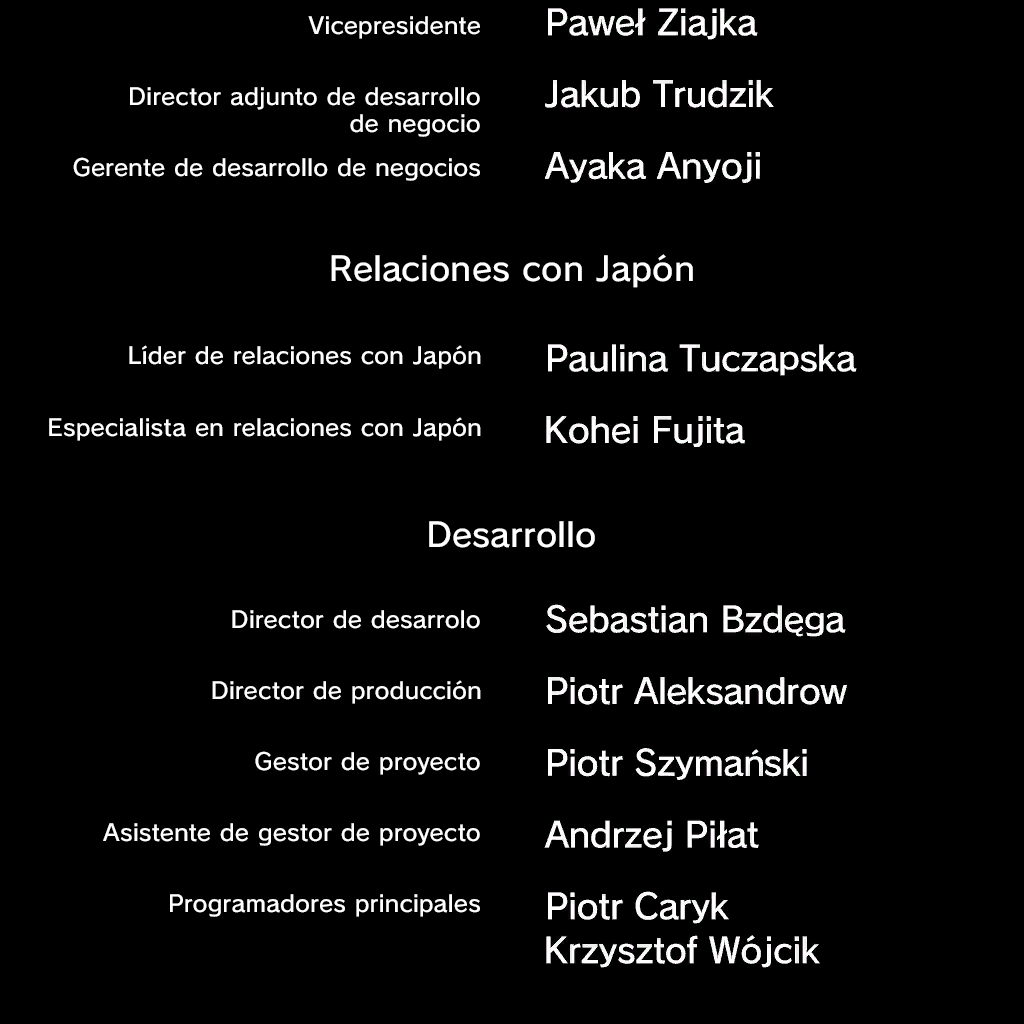
<style>
.page{position:relative;width:1024px;height:1024px;background:#000000}
.page>*{position:absolute;margin:0}
.t1{font:22.8px "SCEPS3RodinLATIN-Regular";letter-spacing:0.015em;color:#ffffff}
.t2{font:32.9px "SCEPS3RodinLATIN-Regular";letter-spacing:0.015em;color:#ffffff}
</style>
<div class="page">
<p class="t1" style="left:308px;top:16px;width:172px;height:23px">Vicepresidente</p>
<p class="t1" style="left:130px;top:87px;width:350px;height:50px;text-align:right">Director adjunto de desarrollo<br>de negocio</p>
<p class="t1" style="left:73px;top:157px;width:407px;height:24px">Gerente de desarrollo de negocios</p>
<p class="t2" style="left:331px;top:254px;width:362px;height:34px">Relaciones con Japón</p>
<p class="t1" style="left:129px;top:345px;width:352px;height:24px">Líder de relaciones con Japón</p>
<p class="t1" style="left:49px;top:417px;width:432px;height:24px">Especialista en relaciones con Japón</p>
<p class="t2" style="left:429px;top:521px;width:166px;height:27px">Desarrollo</p>
<p class="t1" style="left:232px;top:610px;width:248px;height:19px">Director de desarrolo</p>
<p class="t1" style="left:212px;top:680px;width:269px;height:24px">Director de producción</p>
<p class="t1" style="left:255px;top:751px;width:225px;height:24px">Gestor de proyecto</p>
<p class="t1" style="left:103px;top:823px;width:377px;height:23px">Asistente de gestor de proyecto</p>
<p class="t1" style="left:170px;top:894px;width:310px;height:23px">Programadores principales</p>
</div>
